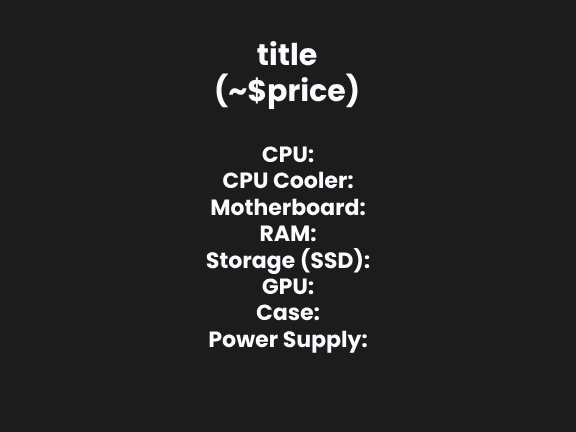
<style>
.page{position:relative;width:576px;height:432px;background:#1c1c1c}
.page>*{position:absolute;margin:0}
.t1{font:30px "Poppins-Bold";color:#fafaff}
.t2{font:22px "Poppins-Bold";color:#fafaff}
</style>
<div class="page">
<p class="t1" style="left:216px;top:40px;width:142px;height:69px;text-align:center">title<br>(~$price)</p>
<p class="t2" style="left:206px;top:146px;width:164px;height:207px;text-align:center">CPU:<br>CPU Cooler:<br>Motherboard:<br>RAM:<br>Storage (SSD):<br>GPU:<br>Case:<br>Power Supply:</p>
</div>
